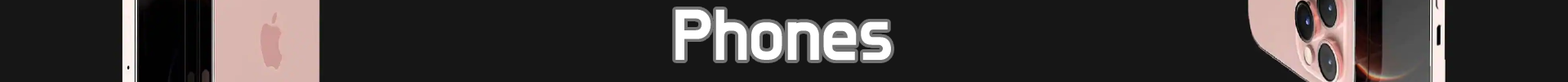
<style>
.page{position:relative;width:1568px;height:82px;background:#161616}
.page>*{position:absolute;margin:0}
.t1{font:73.5px "DoHyeon-Regular";color:#ffffff}
</style>
<div class="page">
<p class="t1" style="left:675px;top:9px;width:217px;height:51px">Phones</p>
</div>
